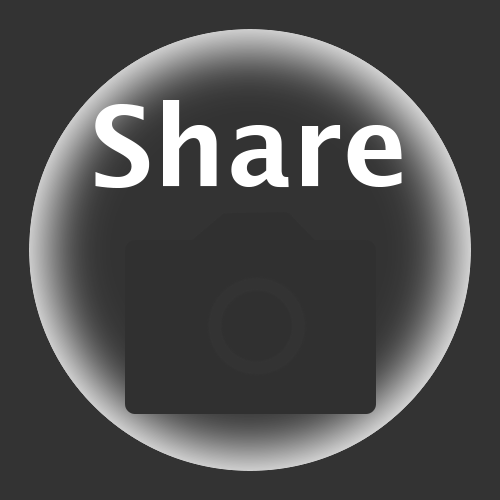
<style>
.page{position:relative;width:500px;height:500px;background:#333333}
.page>*{position:absolute;margin:0}
.t1{font:111.4px "LucidaGrande-Bold";color:#ffffff}
</style>
<div class="page">
<p class="t1" style="left:95px;top:100px;width:307px;height:88px">Share</p>
</div>
